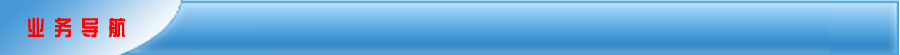
<style>
.page{position:relative;width:900px;height:55px}
.page>*{position:absolute;margin:0}
.t1{font:21.1px "ç»å¸ç»¼èºä½ç®-regular";color:#ff0000;scale:0.85 1}
</style>
<div class="page">
<p class="t1" style="left:28px;top:17px;width:97px;height:21px">业 务 导 航</p>
</div>
